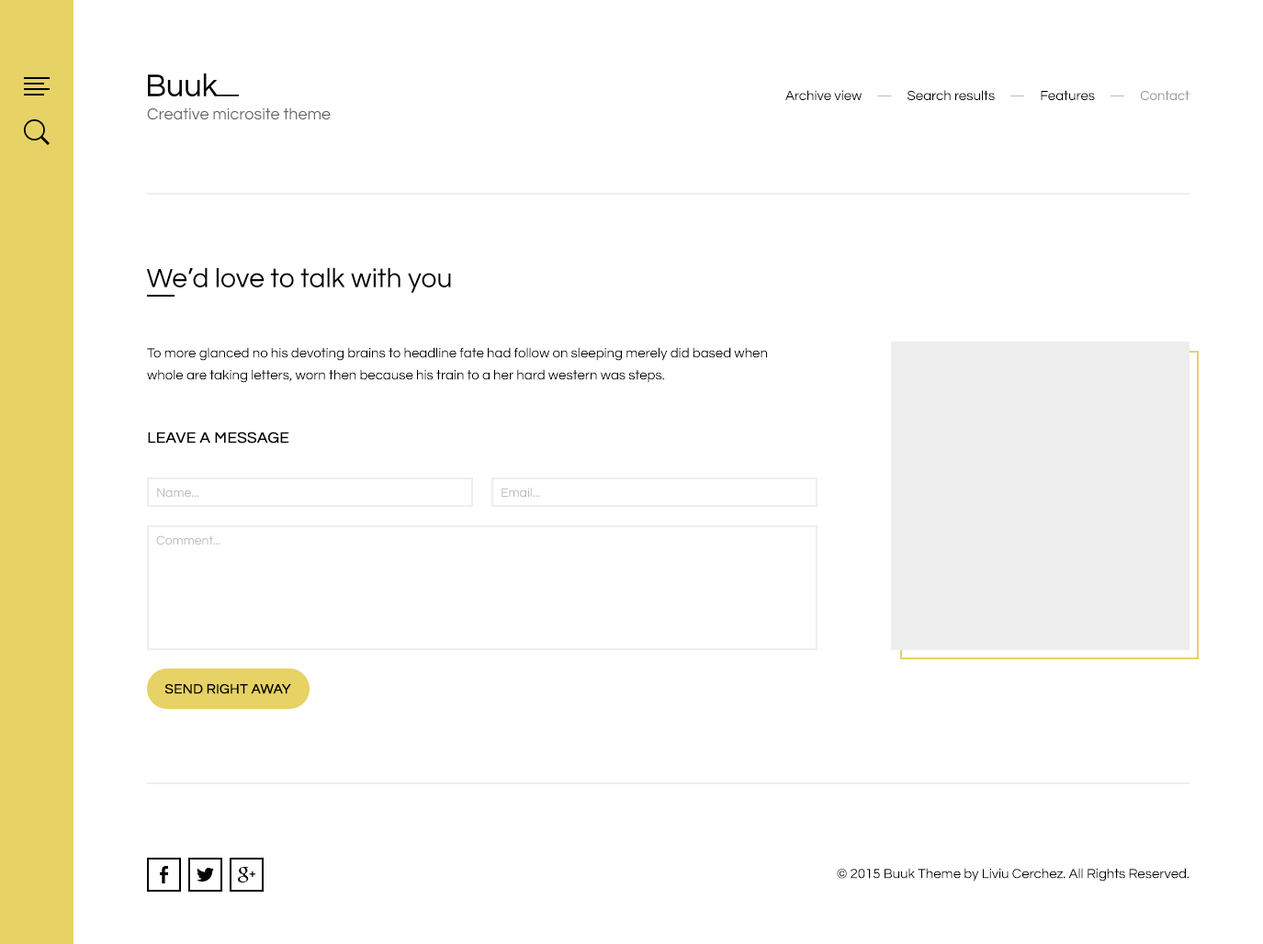
<style>
.page{position:relative;width:1263px;height:944px;background:#ffffff}
.page>*{position:absolute;margin:0}
.t1{font:13.8px "Questrial-Regular";color:#000000}
.t2{font:13.8px "Questrial-Regular";color:#bbbbbb}
.t3{font:13.8px "Questrial-Regular";color:#999999}
.t4{font:16.5px "Questrial-Regular";color:#676767}
.t5{font:27.6px "Questrial-Regular";color:#000000}
.t6{font:13.8px/22px "Questrial-Regular";color:#000000}
.t7{font:15.6px "Questrial-Regular";color:#000000;text-transform:uppercase;font-weight:bold}
.t8{font:12.9px "Questrial-Regular";color:#bbbbbb}
.t9{font:13.8px "Questrial-Regular";color:#000000;text-transform:uppercase;font-weight:bold}
</style>
<div class="page">
<p class="t1" style="left:785px;top:90px;width:404px;height:10px">Archive view     <span class="t2">—</span>     Search results     <span class="t2">—</span>     Features     <span class="t2">—     </span><span class="t3">Contact</span></p>
<p class="t4" style="left:147px;top:107px;width:184px;height:13px">Creative microsite theme</p>
<p class="t5" style="left:146px;top:267px;width:305px;height:26px">We’d love to talk with you</p>
<p class="t6" style="left:147px;top:347px;width:620px;height:36px">To more glanced no his devoting brains to headline fate had follow on sleeping merely did based when whole are taking letters, worn then because his train to a her hard western was steps.</p>
<p class="t7" style="left:148px;top:432px;width:141px;height:12px">Leave a message</p>
<p class="t8" style="left:157px;top:488px;width:41px;height:9px">Name...</p>
<p class="t8" style="left:501px;top:488px;width:39px;height:9px">Email...</p>
<p class="t8" style="left:156px;top:535px;width:64px;height:10px">Comment...</p>
<p class="t9" style="left:164px;top:684px;width:127px;height:10px">Send right away</p>
<p class="t1" style="left:837px;top:868px;width:352px;height:14px">© 2015 Buuk Theme by Liviu Cerchez. All Rights Reserved.</p>
</div>
